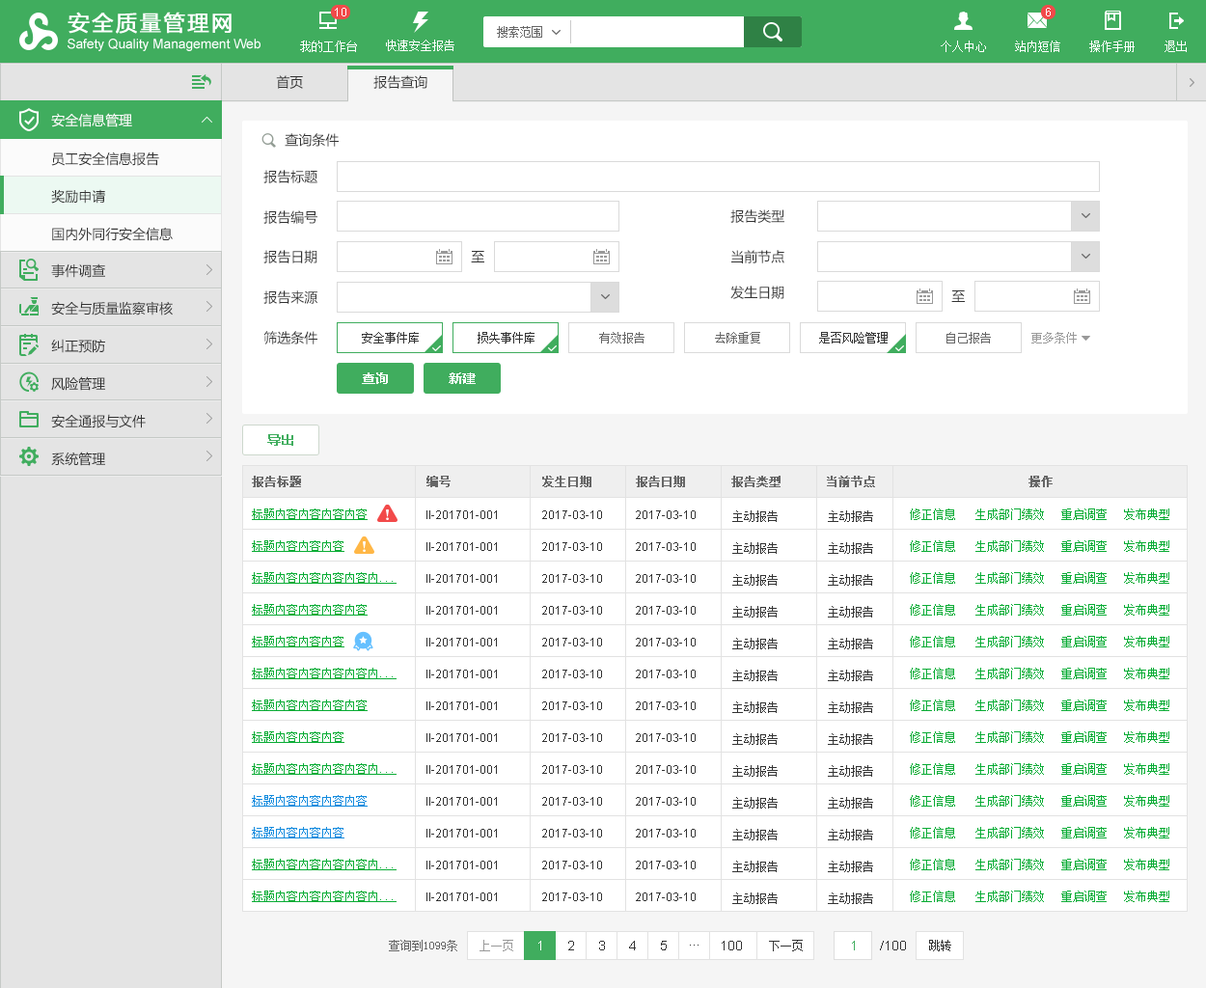
<style>
.page{position:relative;width:1206px;height:988px;background:#ffffff}
.page>*{position:absolute;margin:0}
.t1{font:13.5px "MicrosoftYaHei";color:#333333}
.t2{font:13.5px "MicrosoftYaHei";color:#ffffff}
.t3{font:13.5px/37.6px "MicrosoftYaHei";color:#333333}
.t4{font:11.6px "SimSun";color:#333333}
.t5{font:11.6px "SimSun";color:#666666}
.t6{font:11.6px "SimSun";color:#999999}
.t7{font:13.5px "MicrosoftYaHei-Bold";color:#ffffff}
.t8{font:13.5px "MicrosoftYaHei-Bold";color:#40ad5e}
.t9{font:11.6px "SimSun";color:#666666;font-weight:bold}
.t10{font:11.6px/31.9px "SimSun";color:#09ac35;text-decoration:underline}
.t11{font:11.6px/31.9px "SimSun";color:#09ac35}
.t12{font:11.6px/31.9px "ArialMT";color:#333333}
.t13{font:11.6px/31.9px "SimSun";color:#333333}
.t14{font:11.6px/31.9px "SimSun";color:#138bde;text-decoration:underline}
.t15{font:13.5px "ArialMT";color:#ffffff}
.t16{font:13.5px "ArialMT";color:#333333}
.t17{font:13.5px "ArialMT";color:#40ad5e}
</style>
<div class="page">
<p class="t1" style="left:276px;top:75px;width:27px;height:14px">首页</p>
<p class="t1" style="left:374px;top:75px;width:54px;height:14px">报告查询</p>
<p class="t2" style="left:51px;top:113px;width:81px;height:14px">安全信息管理</p>
<p class="t1" style="left:285px;top:133px;width:54px;height:14px">查询条件</p>
<p class="t3" style="left:51px;top:152px;width:122px;height:89px">员工安全信息报告<br>奖励申请<br>国内外同行安全信息</p>
<p class="t1" style="left:263px;top:170px;width:55px;height:13px">报告标题</p>
<p class="t1" style="left:731px;top:209px;width:54px;height:14px">报告类型</p>
<p class="t1" style="left:263px;top:210px;width:55px;height:14px">报告编号</p>
<p class="t1" style="left:263px;top:250px;width:55px;height:13px">报告日期</p>
<p class="t1" style="left:471px;top:251px;width:14px;height:12px">至</p>
<p class="t1" style="left:732px;top:250px;width:53px;height:13px">当前节点</p>
<p class="t3" style="left:51px;top:263px;width:122px;height:203px">事件调查<br>安全与质量监察审核<br>纠正预防<br>风险管理<br>安全通报与文件<br>系统管理</p>
<p class="t1" style="left:263px;top:291px;width:55px;height:13px">报告来源</p>
<p class="t1" style="left:731px;top:286px;width:54px;height:13px">发生日期</p>
<p class="t1" style="left:952px;top:291px;width:13px;height:11px">至</p>
<p class="t1" style="left:263px;top:331px;width:55px;height:14px">筛选条件</p>
<p class="t4" style="left:362px;top:332px;width:57px;height:12px">安全事件库</p>
<p class="t4" style="left:478px;top:332px;width:57px;height:12px">损失事件库</p>
<p class="t5" style="left:599px;top:332px;width:46px;height:12px">有效报告</p>
<p class="t5" style="left:715px;top:332px;width:46px;height:12px">去除重复</p>
<p class="t4" style="left:819px;top:332px;width:69px;height:12px">是否风险管理</p>
<p class="t5" style="left:947px;top:332px;width:44px;height:12px">自己报告</p>
<p class="t6" style="left:1032px;top:332px;width:45px;height:12px">更多条件</p>
<p class="t7" style="left:362px;top:373px;width:26px;height:11px">查询</p>
<p class="t7" style="left:449px;top:373px;width:27px;height:11px">新建</p>
<p class="t8" style="left:267px;top:434px;width:26px;height:12px">导出</p>
<p class="t9" style="left:252px;top:476px;width:49px;height:11px">报告标题</p>
<p class="t9" style="left:427px;top:476px;width:24px;height:11px">编号</p>
<p class="t9" style="left:542px;top:476px;width:50px;height:11px">发生日期</p>
<p class="t9" style="left:636px;top:476px;width:49px;height:11px">报告日期</p>
<p class="t9" style="left:732px;top:476px;width:49px;height:11px">报告类型</p>
<p class="t9" style="left:827px;top:476px;width:48px;height:11px">当前节点</p>
<p class="t9" style="left:1029px;top:476px;width:24px;height:11px">操作</p>
<p class="t10" style="left:252px;top:509px;width:145px;height:202px">标题内容内容内容内容<br>标题内容内容内容<br>标题内容内容内容内容内...<br>标题内容内容内容内容<br>标题内容内容内容<br>标题内容内容内容内容内...<br>标题内容内容内容内容内...</p>
<p class="t11" style="left:910px;top:509px;width:46px;height:202px">修正信息<br>修正信息<br>修正信息<br>修正信息<br>修正信息<br>修正信息<br>修正信息</p>
<p class="t11" style="left:976px;top:509px;width:68px;height:202px">生成部门绩效<br>生成部门绩效<br>生成部门绩效<br>生成部门绩效<br>生成部门绩效<br>生成部门绩效<br>生成部门绩效</p>
<p class="t11" style="left:1062px;top:509px;width:45px;height:202px">重启调查<br>重启调查<br>重启调查<br>重启调查<br>重启调查<br>重启调查<br>重启调查</p>
<p class="t11" style="left:1124px;top:509px;width:46px;height:202px">发布典型<br>发布典型<br>发布典型<br>发布典型<br>发布典型<br>发布典型<br>发布典型</p>
<p class="t12" style="left:427px;top:511px;width:70px;height:199px">II-201701-001<br>II-201701-001<br>II-201701-001<br>II-201701-001<br>II-201701-001<br>II-201701-001<br>II-201701-001</p>
<p class="t12" style="left:542px;top:511px;width:60px;height:199px">2017-03-10 <br>2017-03-10 <br>2017-03-10 <br>2017-03-10 <br>2017-03-10 <br>2017-03-10<br>2017-03-10</p>
<p class="t12" style="left:636px;top:511px;width:60px;height:199px">2017-03-10 <br>2017-03-10 <br>2017-03-10 <br>2017-03-10 <br>2017-03-10 <br>2017-03-10 <br>2017-03-10</p>
<p class="t13" style="left:733px;top:511px;width:45px;height:202px">主动报告<br>主动报告<br>主动报告<br>主动报告<br>主动报告<br>主动报告<br>主动报告</p>
<p class="t13" style="left:828px;top:511px;width:45px;height:202px">主动报告<br>主动报告<br>主动报告<br>主动报告<br>主动报告<br>主动报告<br>主动报告</p>
<p class="t10" style="left:252px;top:700px;width:145px;height:202px">标题内容内容内容内容<br>标题内容内容内容<br>标题内容内容内容内容内...<br><span class="t14">标题内容内容内容内容<br>标题内容内容内容<br></span>标题内容内容内容内容内...<br>标题内容内容内容内容内...</p>
<p class="t12" style="left:427px;top:702px;width:70px;height:199px">II-201701-001<br>II-201701-001<br>II-201701-001<br>II-201701-001<br>II-201701-001<br>II-201701-001<br>II-201701-001</p>
<p class="t12" style="left:542px;top:702px;width:60px;height:199px">2017-03-10 <br>2017-03-10 <br>2017-03-10 <br>2017-03-10 <br>2017-03-10 <br>2017-03-10<br>2017-03-10</p>
<p class="t12" style="left:636px;top:702px;width:60px;height:199px">2017-03-10 <br>2017-03-10 <br>2017-03-10 <br>2017-03-10 <br>2017-03-10 <br>2017-03-10 <br>2017-03-10</p>
<p class="t13" style="left:733px;top:702px;width:45px;height:202px">主动报告<br>主动报告<br>主动报告<br>主动报告<br>主动报告<br>主动报告<br>主动报告</p>
<p class="t13" style="left:828px;top:702px;width:45px;height:202px">主动报告<br>主动报告<br>主动报告<br>主动报告<br>主动报告<br>主动报告<br>主动报告</p>
<p class="t11" style="left:910px;top:700px;width:46px;height:202px">修正信息<br>修正信息<br>修正信息<br>修正信息<br>修正信息<br>修正信息<br>修正信息</p>
<p class="t11" style="left:976px;top:700px;width:68px;height:202px">生成部门绩效<br>生成部门绩效<br>生成部门绩效<br>生成部门绩效<br>生成部门绩效<br>生成部门绩效<br>生成部门绩效</p>
<p class="t11" style="left:1062px;top:700px;width:45px;height:202px">重启调查<br>重启调查<br>重启调查<br>重启调查<br>重启调查<br>重启调查<br>重启调查</p>
<p class="t11" style="left:1124px;top:700px;width:46px;height:202px">发布典型<br>发布典型<br>发布典型<br>发布典型<br>发布典型<br>发布典型<br>发布典型</p>
<p class="t5" style="left:389px;top:940px;width:68px;height:12px">查询到1099条</p>
<p class="t6" style="left:480px;top:940px;width:33px;height:12px">上一页</p>
<p class="t15" style="left:539px;top:941px;width:2px;height:10px">1</p>
<p class="t16" style="left:568px;top:941px;width:6px;height:10px">2</p>
<p class="t16" style="left:599px;top:941px;width:6px;height:10px">3</p>
<p class="t16" style="left:629px;top:941px;width:7px;height:10px">4</p>
<p class="t16" style="left:661px;top:941px;width:6px;height:10px">5</p>
<p class="t16" style="left:722px;top:941px;width:20px;height:10px">100</p>
<p class="t4" style="left:769px;top:940px;width:34px;height:12px">下一页</p>
<p class="t17" style="left:852px;top:941px;width:3px;height:10px">1</p>
<p class="t16" style="left:880px;top:941px;width:26px;height:10px">/100</p>
<p class="t4" style="left:929px;top:940px;width:23px;height:12px">跳转</p>
<p class="t16" style="left:690px;top:945px;width:9px;height:1px">...</p>
</div>
